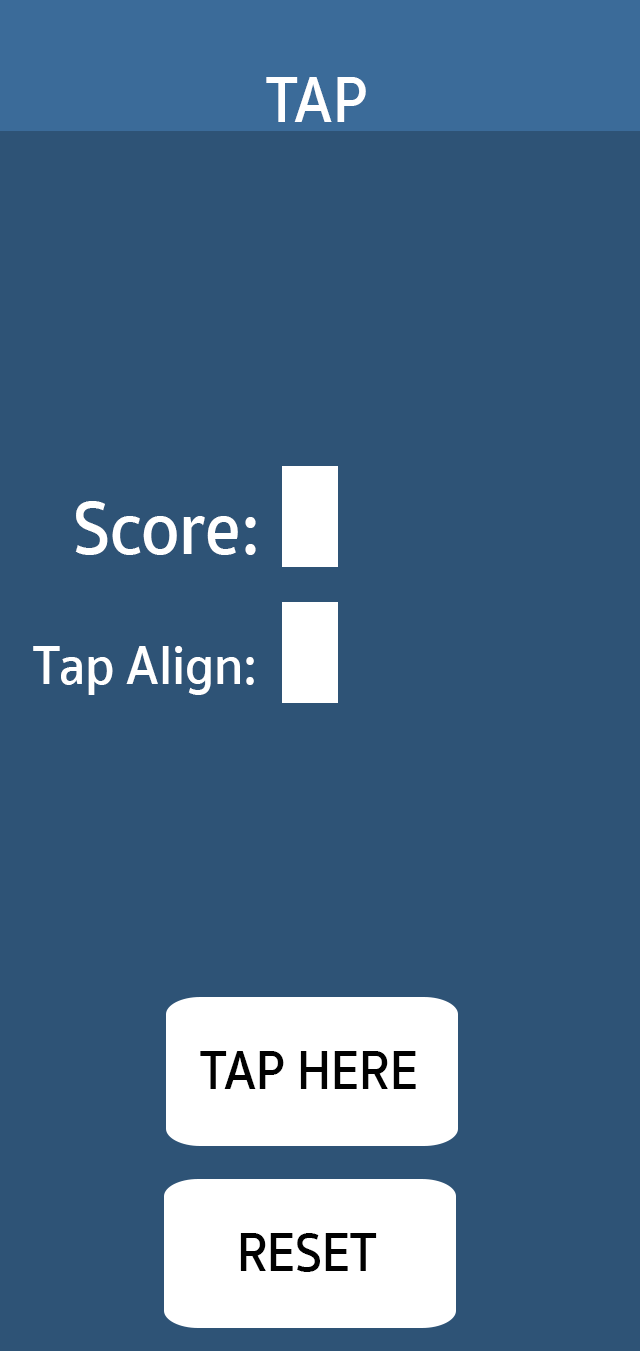
<style>
.page{position:relative;width:640px;height:1351px;background:#2e5376}
.page>*{position:absolute;margin:0}
.t1{font:66.6px "SukhumvitSet-SemiBold";color:#ffffff;scale:0.91 1}
.t2{font:76.6px "SukhumvitSet-SemiBold";color:#ffffff;scale:0.91 1}
.t3{font:56.5px "SukhumvitSet-SemiBold";color:#ffffff;scale:0.91 1}
.t4{font:55.8px "SukhumvitSet-SemiBold";color:#010101;scale:0.91 1}
</style>
<div class="page">
<p class="t1" style="left:266px;top:77px;width:100px;height:45px">TAP</p>
<p class="t2" style="left:75px;top:501px;width:181px;height:54px">Score:</p>
<p class="t3" style="left:33px;top:646px;width:221px;height:49px">Tap Align:</p>
<p class="t4" style="left:200px;top:1051px;width:216px;height:38px">TAP HERE</p>
<p class="t4" style="left:240px;top:1233px;width:137px;height:39px">RESET</p>
</div>
